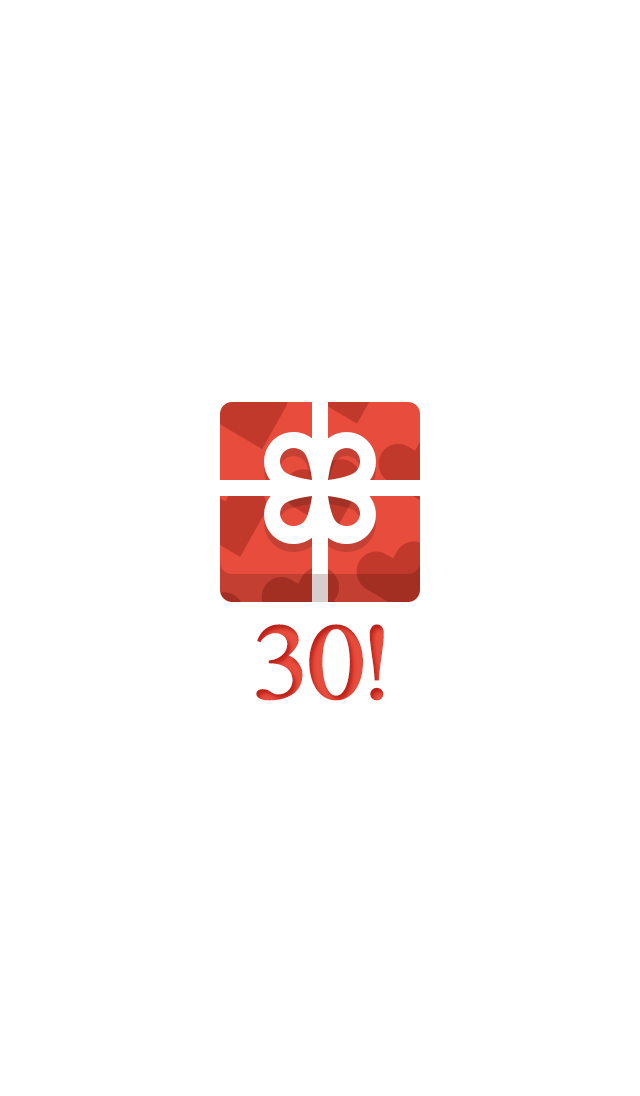
<style>
.page{position:relative;width:640px;height:1096px;background:#ffffff}
.page>*{position:absolute;margin:0}
.t1{font:150px "SinhalaMN";letter-spacing:-0.06em;color:#dd4233;font-weight:bold}
</style>
<div class="page">
<p class="t1" style="left:256px;top:624px;width:128px;height:77px">30!</p>
</div>
